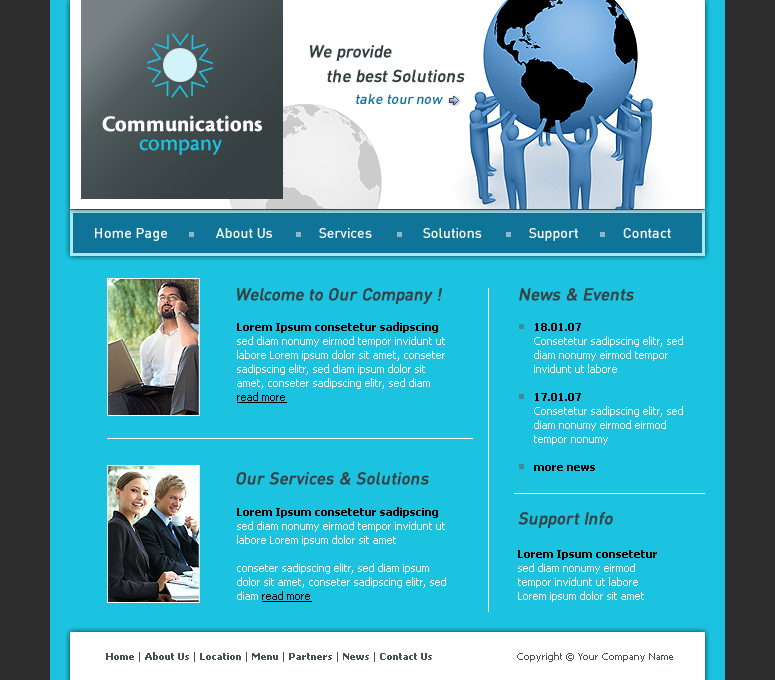
<style>
.page{position:relative;width:775px;height:680px;background:#1bc3e0}
.page>*{position:absolute;margin:0}
.t1{font:17px/24.6px "DINCE-Medium";color:#364042;font-style:italic}
.t2{font:14px "DINCE-Medium";color:#0f7497;font-style:italic}
.t3{font:23px "CronosPro-BoldSubh";color:#ffffff}
.t4{font:23px "CronosPro-Regular";color:#1bc3e0}
.t5{font:14px "DINCE-Medium";color:#ffffff}
.t6{font:17px "DINCE-Medium";color:#364042;font-style:italic}
.t7{font:11px/14px "Tahoma";color:#ffffff}
.t8{font:11px/14px "Tahoma-Bold";color:#000000}
.t9{font:11px/14px "Tahoma";color:#000000;text-decoration:underline}
.t10{font:10px "Tahoma-Bold";color:#485254}
.t11{font:10px "Tahoma";color:#485254}
</style>
<div class="page">
<p class="t1" style="left:310px;top:45px;width:155px;height:38px">We provide<br>    the best Solutions</p>
<p class="t2" style="left:356px;top:94px;width:87px;height:10px">take tour now</p>
<p class="t3" style="left:102px;top:115px;width:160px;height:17px">Communications</p>
<p class="t4" style="left:139px;top:139px;width:83px;height:16px">company</p>
<p class="t5" style="left:95px;top:228px;width:72px;height:13px">Home Page</p>
<p class="t5" style="left:215px;top:228px;width:57px;height:10px">About Us</p>
<p class="t5" style="left:319px;top:228px;width:53px;height:10px">Services</p>
<p class="t5" style="left:423px;top:228px;width:59px;height:10px">Solutions</p>
<p class="t5" style="left:529px;top:228px;width:49px;height:13px">Support</p>
<p class="t5" style="left:623px;top:228px;width:48px;height:10px">Contact</p>
<p class="t6" style="left:237px;top:288px;width:205px;height:16px">Welcome to Our Company !</p>
<p class="t6" style="left:519px;top:288px;width:115px;height:13px">News &amp; Events</p>
<p class="t7" style="left:237px;top:322px;width:208px;height:81px"><span class="t8">Lorem Ipsum consetetur sadipscing </span>sed diam nonumy eirmod tempor invidunt ut labore Lorem ipsum dolor sit amet, conseter sadipscing elitr, sed diam ipsum dolor sit amet, conseter sadipscing elitr, sed diam <span class="t9">read more</span></p>
<p class="t7" style="left:534px;top:323px;width:149px;height:148px"><span class="t8">18.01.07<br></span>Consetetur sadipscing elitr, sed diam nonumy eirmod tempor invidunt ut labore <br><br><span class="t8">17.01.07<br></span>Consetetur sadipscing elitr, sed diam nonumy eirmod eirmod tempor nonumy <br><br><span class="t8">more news</span></p>
<p class="t6" style="left:236px;top:472px;width:193px;height:13px">Our Services &amp; Solutions</p>
<p class="t7" style="left:237px;top:507px;width:209px;height:95px"><span class="t8">Lorem Ipsum consetetur sadipscing </span>sed diam nonumy eirmod tempor invidunt ut labore Lorem ipsum dolor sit amet<br><br>conseter sadipscing elitr, sed diam ipsum dolor sit amet, conseter sadipscing elitr, sed diam <span class="t9">read more</span></p>
<p class="t6" style="left:518px;top:512px;width:95px;height:16px">Support Info</p>
<p class="t7" style="left:518px;top:550px;width:139px;height:52px"><span class="t8">Lorem Ipsum consetetur  </span>sed diam nonumy eirmod tempor invidunt ut labore Lorem ipsum dolor sit amet</p>
<p class="t10" style="left:106px;top:652px;width:326px;height:10px"><span class="t11">  </span>Home <span class="t11">| </span>About Us <span class="t11">| </span>Location <span class="t11">| </span>Menu <span class="t11">| </span>Partners <span class="t11">| </span>News <span class="t11">| </span>Contact Us</p>
<p class="t11" style="left:517px;top:652px;width:156px;height:10px">Copyright © Your Company Name</p>
</div>
